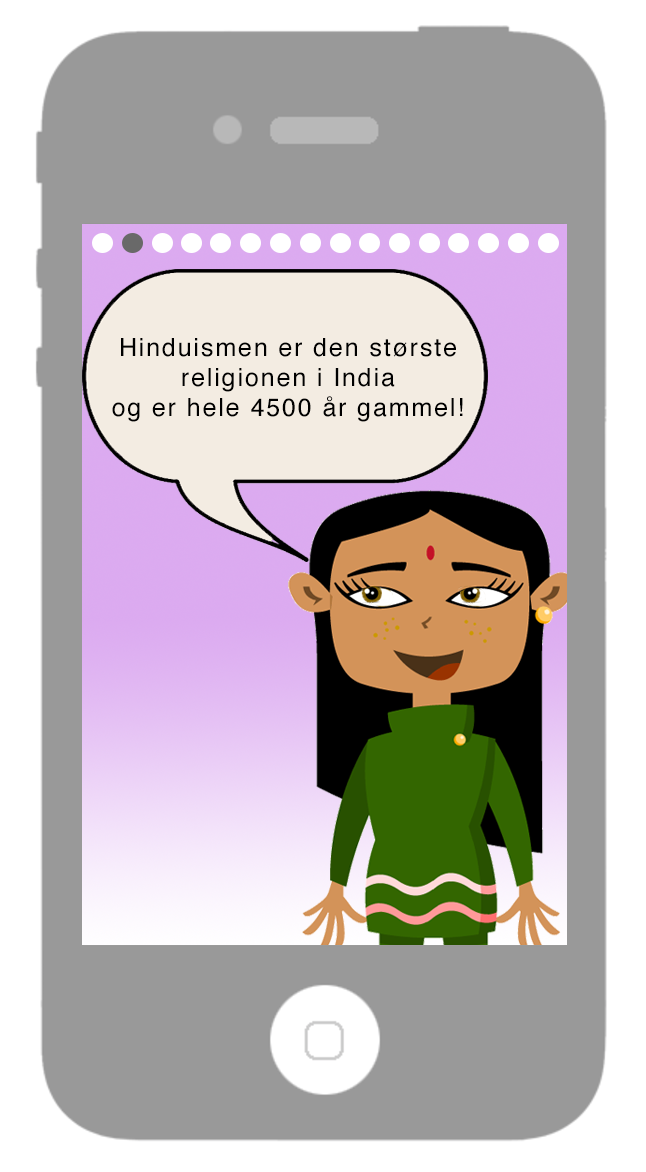
<style>
.page{position:relative;width:646px;height:1172px;background:#999999}
.page>*{position:absolute;margin:0}
.t1{font:12px "Helvetica";letter-spacing:0.075em;color:#000000}
</style>
<div class="page">
<p class="t1" style="left:112px;top:338px;width:351px;height:84px;text-align:center">Hinduismen er den største<br>religionen i India<br>og er hele 4500 år gammel!</p>
</div>
